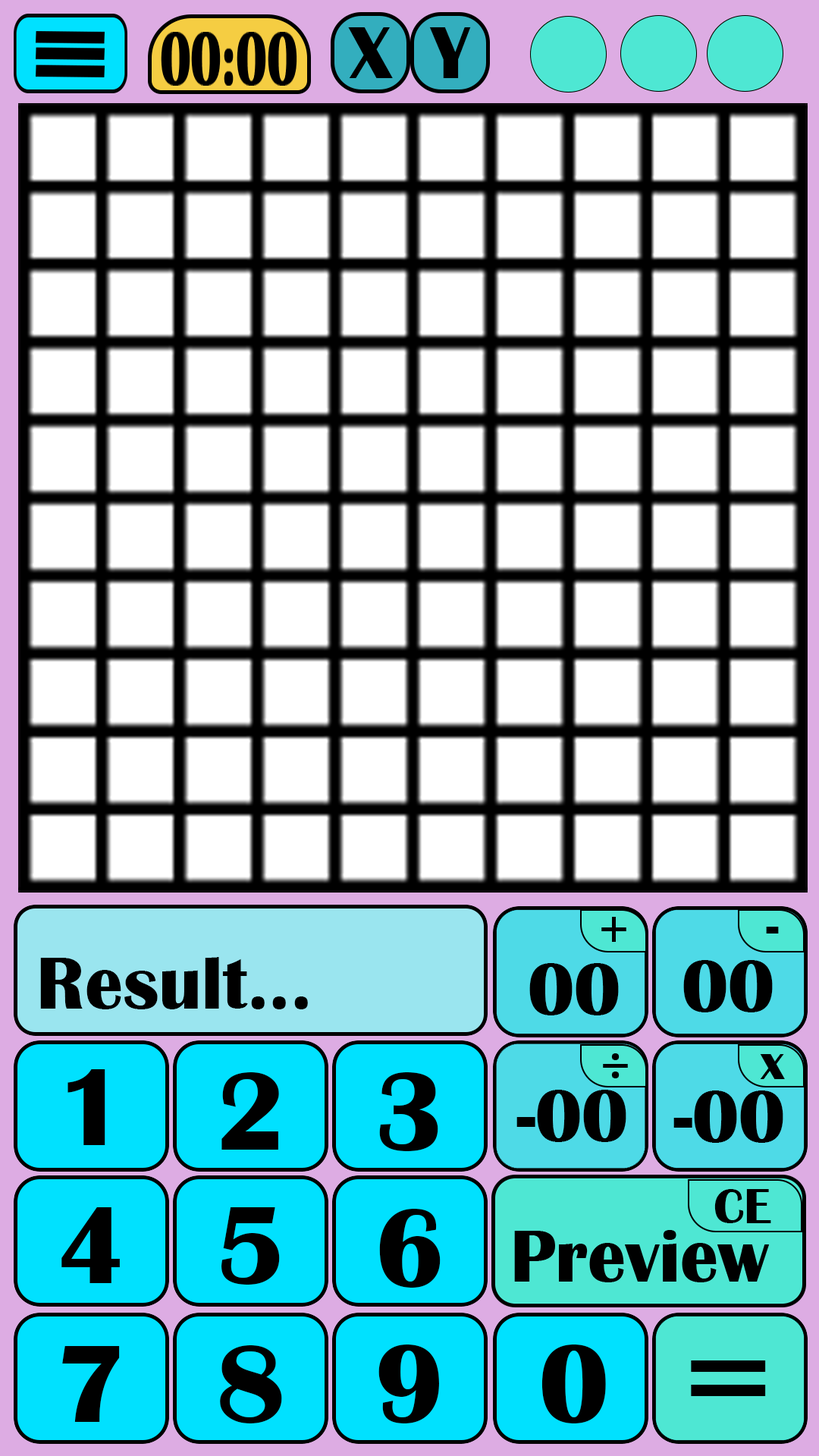
<style>
.page{position:relative;width:819px;height:1456px;background:#ffffff}
.page>*{position:absolute;margin:0}
.t1{font:75.8px "BritannicBold";color:#000000}
.t2{font:50.6px "BritannicBold";color:#000000}
.t3{font:113.7px "BritannicBold";color:#000000}
.t4{font:151.7px "BritannicBold";color:#000000}
</style>
<div class="page">
<p class="t1" style="left:348px;top:27px;width:45px;height:51px">X</p>
<p class="t1" style="left:429px;top:27px;width:42px;height:51px">Y</p>
<p class="t2" style="left:601px;top:917px;width:25px;height:25px">+</p>
<p class="t2" style="left:766px;top:927px;width:13px;height:6px">-</p>
<p class="t1" style="left:40px;top:957px;width:268px;height:52px">Result...</p>
<p class="t1" style="left:529px;top:963px;width:90px;height:52px">00</p>
<p class="t1" style="left:683px;top:960px;width:90px;height:52px">00</p>
<p class="t2" style="left:603px;top:1053px;width:25px;height:25px">÷</p>
<p class="t2" style="left:760px;top:1054px;width:25px;height:25px">x</p>
<p class="t3" style="left:67px;top:1069px;width:38px;height:76px">1</p>
<p class="t3" style="left:221px;top:1072px;width:58px;height:78px">2</p>
<p class="t3" style="left:379px;top:1072px;width:59px;height:79px">3</p>
<p class="t1" style="left:516px;top:1090px;width:110px;height:52px">-00</p>
<p class="t1" style="left:673px;top:1090px;width:110px;height:53px">-00</p>
<p class="t2" style="left:714px;top:1189px;width:57px;height:34px">CE</p>
<p class="t3" style="left:61px;top:1207px;width:59px;height:76px">4</p>
<p class="t3" style="left:221px;top:1207px;width:59px;height:78px">5</p>
<p class="t3" style="left:379px;top:1209px;width:62px;height:79px">6</p>
<p class="t3" style="left:62px;top:1346px;width:58px;height:76px">7</p>
<p class="t3" style="left:220px;top:1345px;width:62px;height:78px">8</p>
<p class="t3" style="left:378px;top:1345px;width:61px;height:78px">9</p>
<p class="t3" style="left:541px;top:1345px;width:65px;height:78px">0</p>
<p class="t4" style="left:691px;top:1360px;width:75px;height:36px">=</p>
</div>
